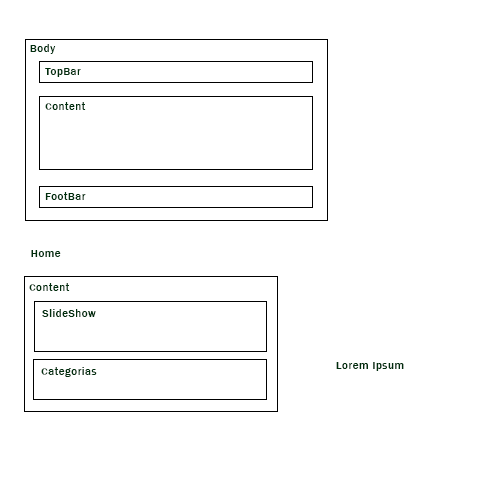
<style>
.page{position:relative;width:500px;height:500px;background:#ffffff}
.page>*{position:absolute;margin:0}
.t1{font:11px "FranklinGothic-Medium";letter-spacing:0.05em;color:#002e0d}
</style>
<div class="page">
<p class="t1" style="left:30px;top:44px;width:26px;height:10px">Body</p>
<p class="t1" style="left:45px;top:68px;width:36px;height:9px">TopBar</p>
<p class="t1" style="left:45px;top:102px;width:41px;height:8px">Content</p>
<p class="t1" style="left:45px;top:192px;width:41px;height:8px">FootBar</p>
<p class="t1" style="left:31px;top:250px;width:30px;height:7px">Home</p>
<p class="t1" style="left:29px;top:283px;width:41px;height:8px">Content</p>
<p class="t1" style="left:42px;top:309px;width:54px;height:8px">SlideShow</p>
<p class="t1" style="left:336px;top:362px;width:68px;height:9px">Lorem Ipsum</p>
<p class="t1" style="left:41px;top:367px;width:56px;height:10px">Categorias</p>
</div>
